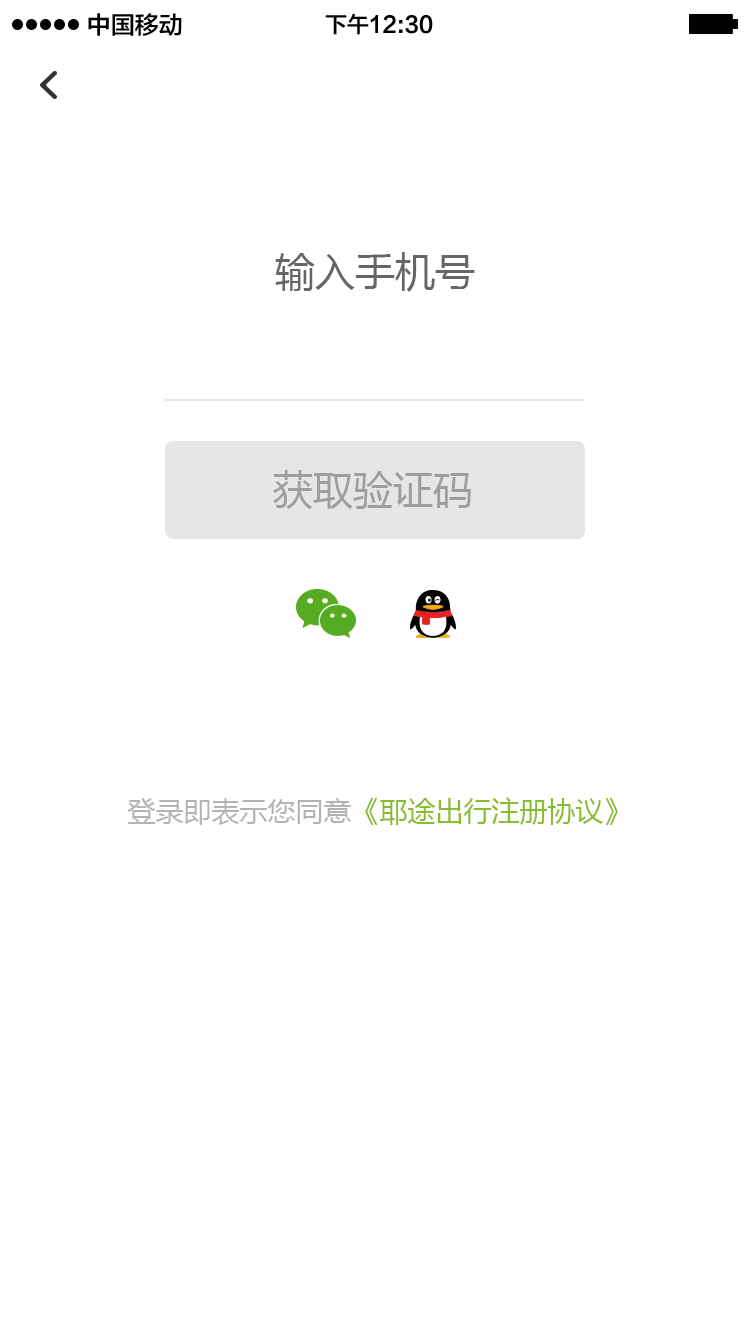
<style>
.page{position:relative;width:750px;height:1334px;background:#ffffff}
.page>*{position:absolute;margin:0}
.t1{font:24px "FZLTZHK--GBK1-0";color:#000000}
.t2{font:22px "FZLTZHK--GBK1-0";color:#000000}
.t3{font:40px "MicrosoftYaHei";color:#666666}
.t4{font:40px "MicrosoftYaHei";color:#9e9e9e}
.t5{font:28px "MicrosoftYaHei";color:#89bc2e}
.t6{font:28px "MicrosoftYaHei";color:#b3b3b3}
</style>
<div class="page">
<p class="t1" style="left:88px;top:13px;width:94px;height:23px">中国移动</p>
<p class="t2" style="left:325px;top:14px;width:108px;height:21px">下午12:30</p>
<p class="t3" style="left:275px;top:252px;width:200px;height:40px">输入手机号</p>
<p class="t4" style="left:273px;top:470px;width:198px;height:39px">获取验证码</p>
<p class="t5" style="left:127px;top:797px;width:491px;height:28px"><span class="t6">登录即表示您同意</span>《耶途出行注册协议》</p>
</div>
